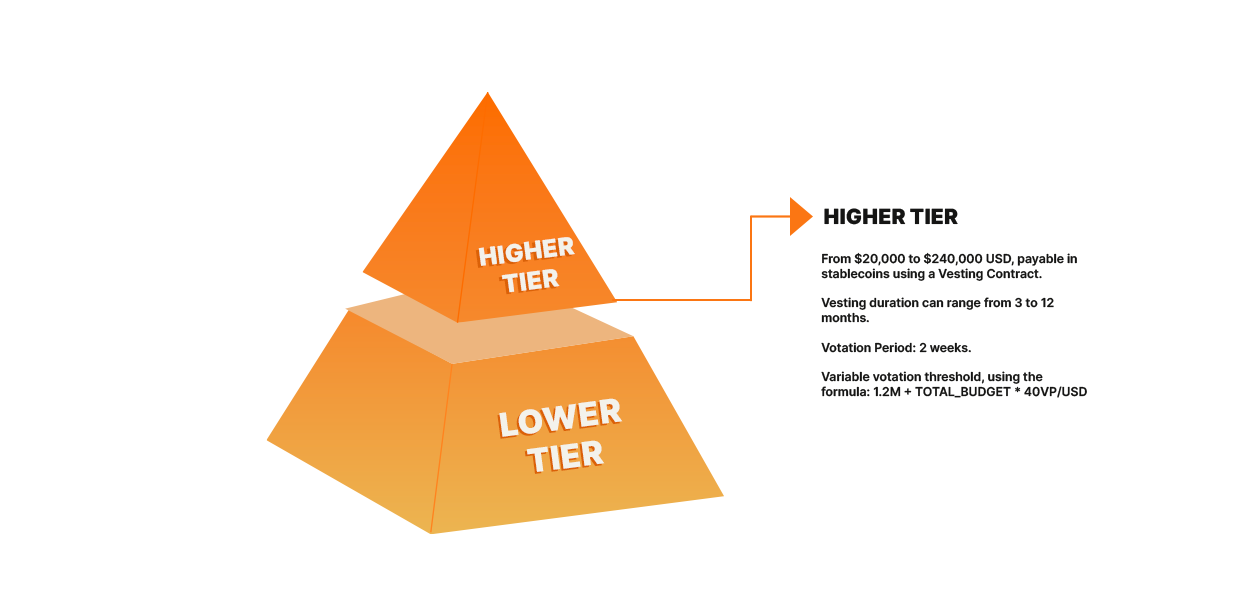
<style>
.page{position:relative;width:1240px;height:600px;background:#ffffff}
.page>*{position:absolute;margin:0}
.t1{font:20.9px "Inter-Black";color:#151514;text-transform:uppercase}
.t2{font:24.5px "Inter-Black";text-transform:uppercase}
.t3{font:24.5px "Inter-Black";color:#f3f2eb;text-transform:uppercase}
.t4{font:12.2px "Inter-SemiBold";color:#151514}
.t5{font:32.9px "Inter-Black";color:#f3f2eb;text-transform:uppercase}
</style>
<div class="page">
<p class="t1" style="left:824px;top:208px;width:134px;height:17px">higher tier</p>
<p class="t2" style="left:475px;top:239px;width:97px;height:56px;text-align:center;rotate:-7deg">Higher <br>Tier</p>
<p class="t3" style="left:478px;top:237px;width:97px;height:56px;text-align:center;rotate:-7deg">Higher <br>Tier</p>
<p class="t4" style="left:821px;top:252px;width:266px;height:146px">From $20,000 to $240,000 USD, payable in stablecoins using a Vesting Contract.<br><br>Vesting duration can range from 3 to 12 months.<br><br>Votation Period: 2 weeks.<br><br>Variable votation threshold, using the formula: 1.2M + TOTAL_BUDGET * 40VP/USD</p>
<p class="t5" style="left:497px;top:400px;width:124px;height:74px;text-align:center;rotate:-7deg">Lower <br>Tier</p>
<p class="t5" style="left:499px;top:398px;width:124px;height:74px;text-align:center;rotate:-7deg">Lower <br>Tier</p>
</div>
